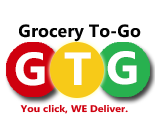
<style>
.page{position:relative;width:155px;height:135px;background:#ffffff}
.page>*{position:absolute;margin:0}
.t1{font:17.6px "Ebrima-Bold";color:#020202}
.t2{font:46.2px "Ebrima-Bold";color:#ffffff}
.t3{font:9.4px "Ebrima-Bold";color:#cf000f;scale:1.12 1}
</style>
<div class="page">
<p class="t1" style="left:19px;top:24px;width:122px;height:18px">Grocery To-Go</p>
<p class="t2" style="left:15px;top:52px;width:30px;height:34px">G</p>
<p class="t2" style="left:64px;top:52px;width:27px;height:33px">T</p>
<p class="t2" style="left:107px;top:51px;width:30px;height:34px">G</p>
<p class="t3" style="left:20px;top:104px;width:108px;height:10px">.You click, WE Deliver</p>
</div>
